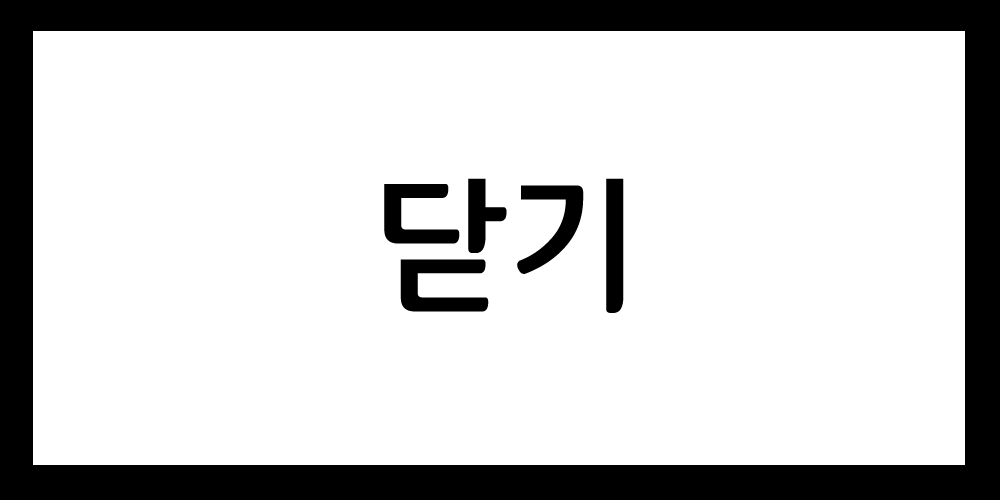
<style>
.page{position:relative;width:1000px;height:500px;background:#ffffff}
.page>*{position:absolute;margin:0}
.t1{font:150px "12LotteMartDreamBold";color:#000000}
</style>
<div class="page">
<p class="t1" style="left:384px;top:178px;width:240px;height:135px">닫기</p>
</div>
